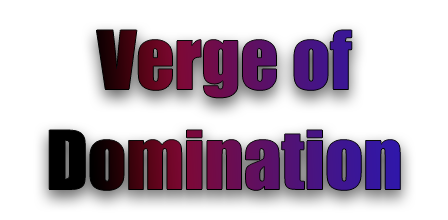
<style>
.page{position:relative;width:448px;height:220px;background:#ffffff}
.page>*{position:absolute;margin:0}
.t1{font:75px/100px "Impact"}
</style>
<div class="page">
<p class="t1" style="left:49px;top:30px;width:352px;height:161px;text-align:center">Verge of<br>Domination</p>
</div>
